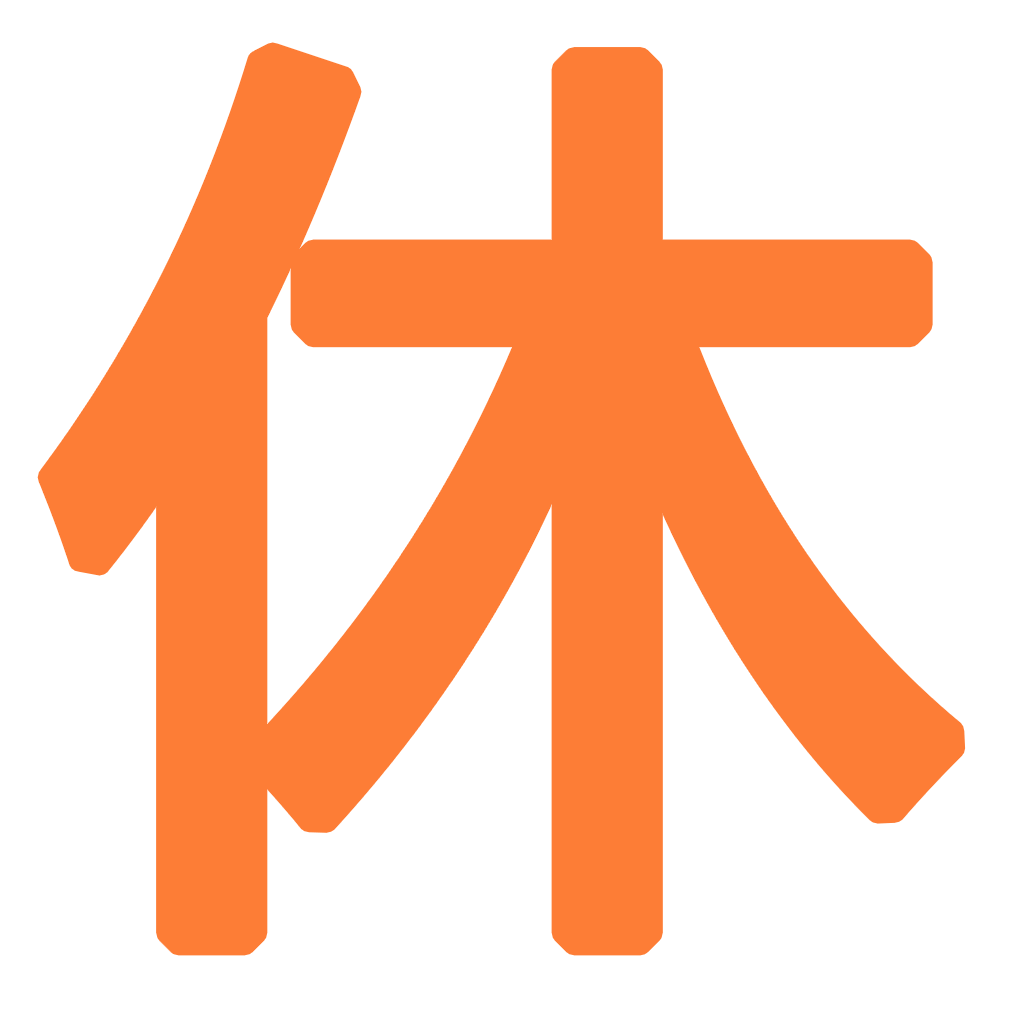
<style>
.page{position:relative;width:1024px;height:1024px;background:#ffffff}
.page>*{position:absolute;margin:0}
.t1{font:900px "MicrosoftYaHei";letter-spacing:0.025em;color:#fd7d36;font-weight:bold}
</style>
<div class="page">
<p class="t1" style="left:47px;top:52px;width:909px;height:894px">休</p>
</div>
